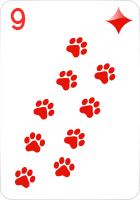
<style>
.page{position:relative;width:140px;height:200px;background:#ffffff}
.page>*{position:absolute;margin:0}
.t1{font:26px "CardCharacters";color:#ff2b2b}
</style>
<div class="page">
<p class="t1" style="left:10px;top:8px;width:16px;height:22px">9</p>
</div>
